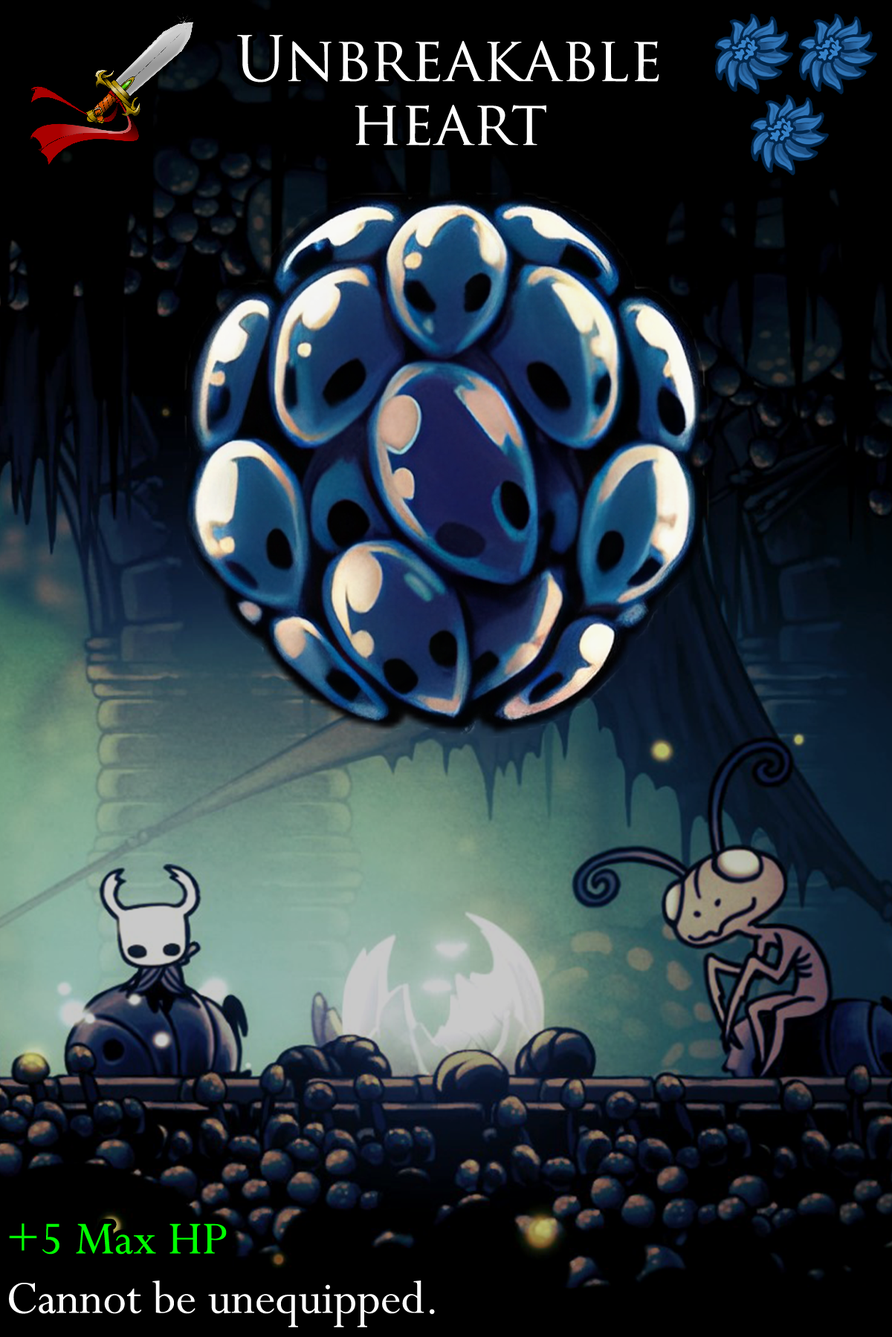
<style>
.page{position:relative;width:892px;height:1337px;background:#000000}
.page>*{position:absolute;margin:0}
.t1{font:104.8px/63.9px "TrajanPro-Regular";color:#ffffff}
.t2{font:87.7px/59.4px "Perpetua";color:#ffffff}
.t3{font:87.7px/59.4px "Perpetua";color:#00ff00}
</style>
<div class="page">
<p class="t1" style="left:237px;top:35px;width:422px;height:111px;text-align:center">Unbreakable<br>heart</p>
<p class="t2" style="left:9px;top:1224px;width:426px;height:104px"><span class="t3">+5 Max HP<br></span>Cannot be unequipped.</p>
</div>
